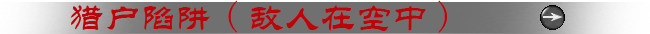
<style>
.page{position:relative;width:650px;height:34px;background:#707070}
.page>*{position:absolute;margin:0}
.t1{font:36px "STLiti";color:#ba060b}
.t2{font:36px "FangSong";color:#ba060b}
</style>
<div class="page">
<p class="t1" style="left:70px;top:0px;width:378px;height:33px">猎户陷阱<span class="t2">(</span>敌人在空中<span class="t2">)</span></p>
</div>
